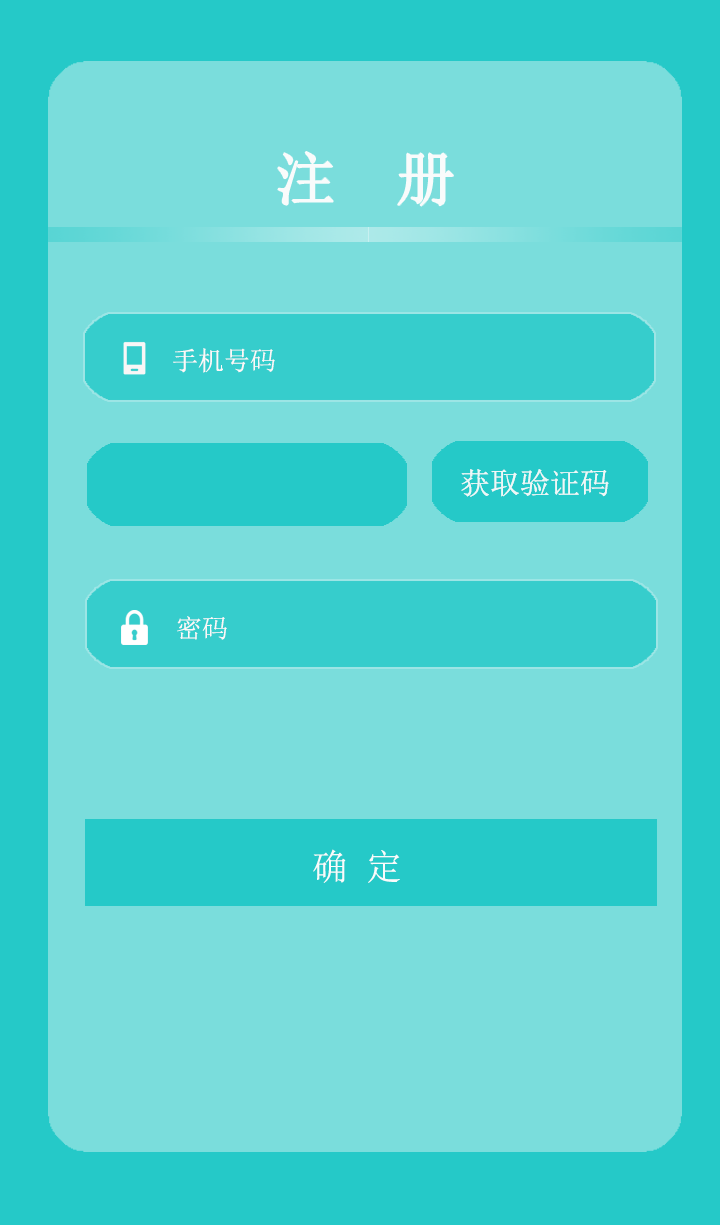
<style>
.page{position:relative;width:720px;height:1225px;background:#7adddc}
.page>*{position:absolute;margin:0}
.t1{font:60px "SimSun";color:#f9fbfb}
.t2{font:26px "SimSun";color:#fcf8f8}
.t3{font:30px "SimSun";color:#fcf8f8}
.t4{font:30px "SimSun";color:#f6fbfb}
.t5{font:36px "SimSun";color:#f9fbfb}
</style>
<div class="page">
<p class="t1" style="left:278px;top:152px;width:175px;height:54px">注  册</p>
<p class="t2" style="left:173px;top:348px;width:102px;height:25px">手机号码</p>
<p class="t3" style="left:461px;top:469px;width:148px;height:28px;opacity:0.75">获取验证码</p>
<p class="t4" style="left:461px;top:469px;width:148px;height:28px;opacity:0.75">获取验证码</p>
<p class="t2" style="left:177px;top:616px;width:50px;height:24px">密码</p>
<p class="t5" style="left:313px;top:849px;width:87px;height:34px">确 定</p>
</div>
